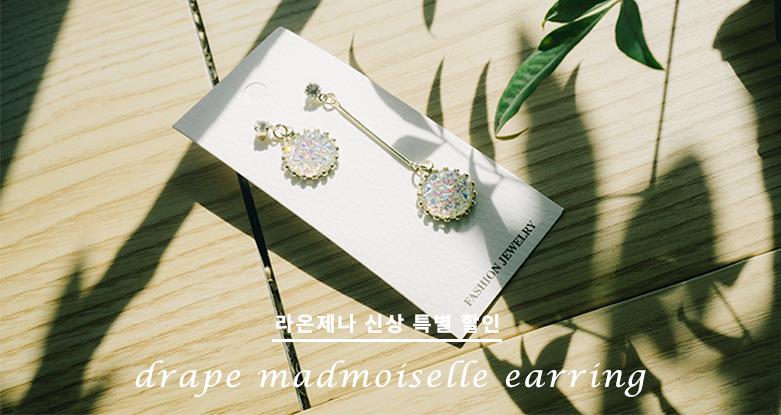
<style>
.page{position:relative;width:781px;height:415px}
.page>*{position:absolute;margin:0}
.t1{font:20.3px "NotoSansCJKkr-Bold";letter-spacing:0.085em;color:#ffffff}
.t2{font:30.6px "LucidaCalligraphy-Italic";letter-spacing:0.085em;color:#ffffff}
</style>
<div class="page">
<p class="t1" style="left:276px;top:314px;width:223px;height:19px">라온제나 신상 특별 할인</p>
<p class="t2" style="left:135px;top:360px;width:511px;height:37px">drape madmoiselle earring</p>
</div>
